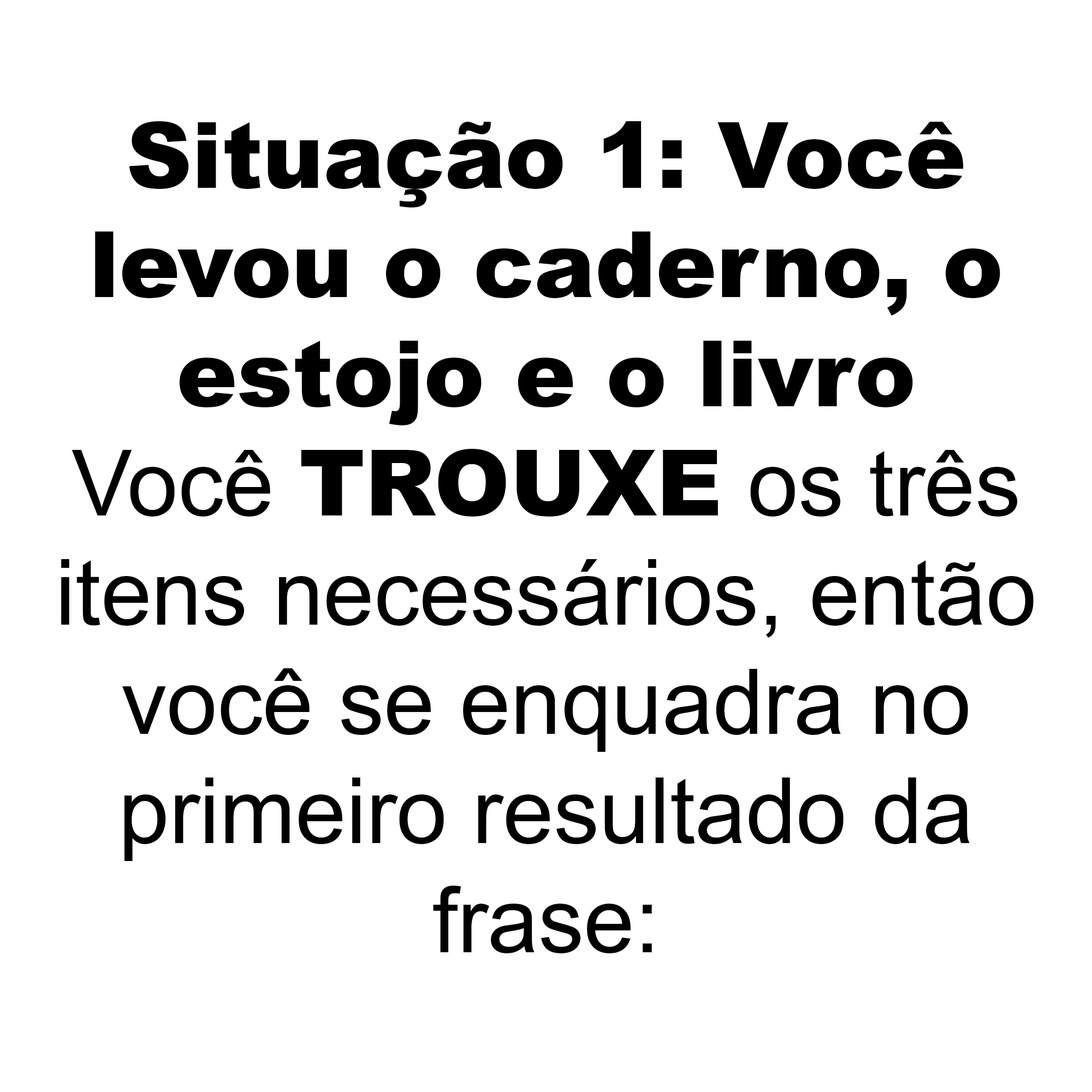
<style>
.page{position:relative;width:1092px;height:1092px;background:#ffffff}
.page>*{position:absolute;margin:0}
.t1{font:91px "ArialMT";color:#000000}
.t2{font:91px "Arial-Black";color:#000000}
</style>
<div class="page">
<p class="t1" style="left:61px;top:121px;width:973px;height:832px;text-align:center"><span class="t2">Situação 1: Você<br>levou o caderno, o<br>estojo e o livro<br></span>Você <span class="t2">TROUXE</span> os três<br>itens necessários, então<br>você se enquadra no<br>primeiro resultado da<br>frase:</p>
</div>
